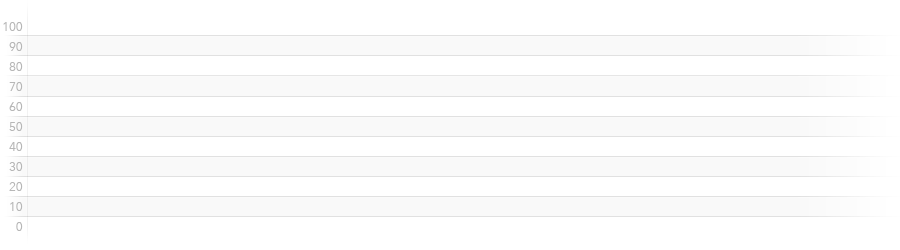
<style>
.page{position:relative;width:900px;height:250px;background:#ffffff}
.page>*{position:absolute;margin:0}
.t1{font:12px/20px "AvenirNext-Regular";letter-spacing:-0.025em;color:#b7b7b7}
</style>
<div class="page">
<p class="t1" style="left:3px;top:22px;width:20px;height:209px;text-align:right">100<br>90<br>80<br>70<br>60<br>50<br>40<br>30<br>20<br>10<br>0</p>
</div>
